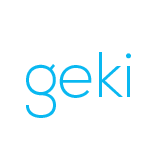
<style>
.page{position:relative;width:158px;height:160px;background:#ffffff}
.page>*{position:absolute;margin:0}
.t1{font:63.9px "NexaLight";color:#09b8f1}
</style>
<div class="page">
<p class="t1" style="left:26px;top:52px;width:105px;height:66px">geki</p>
</div>
